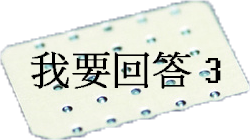
<style>
.page{position:relative;width:250px;height:140px;background:#ffffff}
.page>*{position:absolute;margin:0}
.t1{font:40px "System";color:#000000}
</style>
<div class="page">
<p class="t1" style="left:30px;top:51px;width:191px;height:38px">我要回答3</p>
</div>
